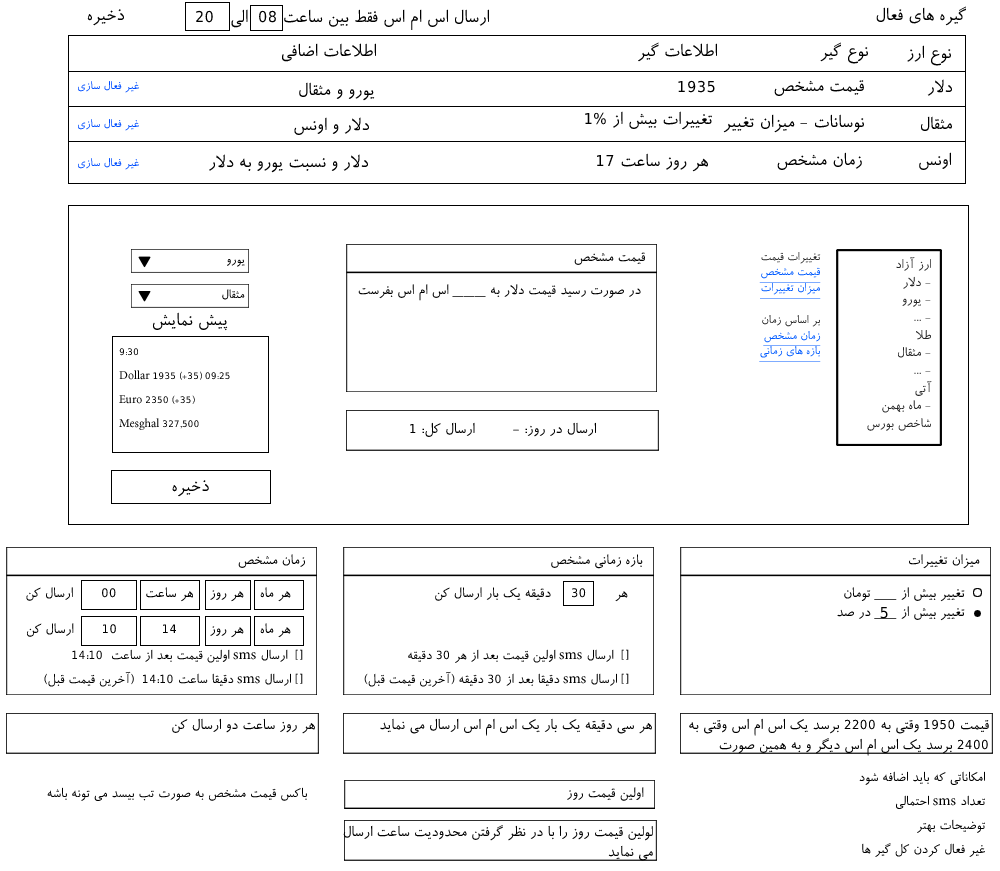
<style>
.page{position:relative;width:1000px;height:871px;background:#ffffff}
.page>*{position:absolute;margin:0}
.t1{font:20px "Roya";color:#000000}
.t2{font:13px "Roya";color:#004eff}
.t3{font:15.8px "Roya";color:#000000}
.t4{font:13.2px/15.8px "Roya";color:#005aff;text-decoration:underline}
.t5{font:13.2px/15.8px "Roya";color:#262626}
.t6{font:14.7px/17.7px "Roya";color:#262626}
.t7{font:14px "Roya";color:#000000}
.t8{font:12px/24px "Roya";color:#000000}
.t9{font:16.5px "Roya";color:#000000}
.t10{font:15.8px/18.9px "Roya";color:#000000}
.t11{font:15px/24px "Roya";color:#000000}
.t12{font:16.5px/19.9px "Roya";color:#000000}
.t13{font:15px "Roya";color:#000000}
</style>
<div class="page">
<p class="t1" style="left:876px;top:6px;width:90px;height:20px">گیره های فعال</p>
<p class="t1" style="left:87px;top:9px;width:37px;height:17px">ذخیره</p>
<p class="t1" style="left:196px;top:9px;width:293px;height:21px">ارسال اس ام اس فقط بین ساعت 08  الی   20</p>
<p class="t1" style="left:282px;top:43px;width:94px;height:19px">اطلاعات اضافی</p>
<p class="t1" style="left:638px;top:42px;width:79px;height:20px">اطلاعات گیر</p>
<p class="t1" style="left:820px;top:42px;width:48px;height:22px">نوع گیر</p>
<p class="t1" style="left:907px;top:45px;width:44px;height:21px">نوع ارز</p>
<p class="t2" style="left:78px;top:81px;width:61px;height:12px">غیر فعال سازی</p>
<p class="t1" style="left:299px;top:82px;width:76px;height:19px">یورو و مثقال</p>
<p class="t1" style="left:678px;top:80px;width:37px;height:13px">1935</p>
<p class="t1" style="left:774px;top:80px;width:90px;height:16px">قیمت مشخص</p>
<p class="t1" style="left:927px;top:79px;width:25px;height:17px">دلار</p>
<p class="t1" style="left:585px;top:111px;width:127px;height:19px">تغییرات بیش از 1%</p>
<p class="t2" style="left:78px;top:119px;width:61px;height:12px">غیر فعال سازی</p>
<p class="t1" style="left:294px;top:117px;width:75px;height:18px">دلار و اونس</p>
<p class="t1" style="left:723px;top:114px;width:141px;height:19px">نوسانات - میزان تغییر</p>
<p class="t1" style="left:921px;top:116px;width:31px;height:15px">مثقال</p>
<p class="t2" style="left:78px;top:158px;width:61px;height:12px">غیر فعال سازی</p>
<p class="t1" style="left:209px;top:154px;width:159px;height:19px">دلار و نسبت یورو به دلار</p>
<p class="t1" style="left:597px;top:153px;width:111px;height:19px">هر روز ساعت 17</p>
<p class="t1" style="left:777px;top:152px;width:85px;height:18px">زمان مشخص</p>
<p class="t1" style="left:919px;top:152px;width:32px;height:18px">اونس</p>
<p class="t3" style="left:574px;top:252px;width:71px;height:13px">قیمت مشخص</p>
<p class="t4" style="left:759px;top:252px;width:62px;height:110px"><span class="t5">تغییرات قیمت<br></span>قیمت مشخص<br>میزان تغییرات<br><br><span class="t5">بر اساس زمان<br></span>زمان مشخص<br>بازه های زمانی</p>
<p class="t6" style="left:867px;top:257px;width:65px;height:174px">ارز آزاد<br>- دلار<br>- یورو<br>- ...<br>طلا<br>- مثقال<br>- ...<br>آتی<br>- ماه بهمن<br>شاخص بورس</p>
<p class="t7" style="left:227px;top:259px;width:18px;height:8px">یورو</p>
<p class="t7" style="left:222px;top:289px;width:23px;height:11px">مثقال</p>
<p class="t3" style="left:358px;top:284px;width:283px;height:17px">در صورت رسید قیمت دلار به ______ اس ام اس بفرست</p>
<p class="t1" style="left:153px;top:312px;width:75px;height:19px">پیش نمایش</p>
<p class="t8" style="left:119px;top:348px;width:111px;height:82px">9:30<br>Dollar 1935 (+35) 09:25<br>Euro 2350 (+35)<br>Mesghal 327,500</p>
<p class="t9" style="left:410px;top:422px;width:186px;height:15px">ارسال در روز: -         ارسال کل: 1</p>
<p class="t1" style="left:172px;top:480px;width:37px;height:17px">ذخیره</p>
<p class="t3" style="left:238px;top:554px;width:67px;height:14px">زمان مشخص</p>
<p class="t3" style="left:551px;top:554px;width:92px;height:15px">بازه زمانی مشخص</p>
<p class="t3" style="left:909px;top:554px;width:71px;height:15px">میزان تغییرات</p>
<p class="t3" style="left:26px;top:587px;width:265px;height:15px">هر ماه    هر روز    هر ساعت       00       ارسال کن</p>
<p class="t3" style="left:435px;top:587px;width:193px;height:15px">هر       30     دقیقه یک بار ارسال کن</p>
<p class="t10" style="left:837px;top:587px;width:128px;height:34px">تغییر بیش از ____ تومان<br>تغییر بیش از ____ در صد</p>
<p class="t1" style="left:880px;top:607px;width:8px;height:12px">5</p>
<p class="t3" style="left:27px;top:623px;width:264px;height:15px">هر ماه    هر روز        14           10       ارسال کن</p>
<p class="t11" style="left:44px;top:649px;width:259px;height:38px">[]  ارسال sms اولین قیمت بعد از ساعت  14:10<br>[] ارسال sms دقیقا ساعت 14:10  (آخرین قیمت قبل)</p>
<p class="t11" style="left:364px;top:649px;width:265px;height:38px">[]  ارسال sms اولین قیمت بعد از هر 30 دقیقه<br>[] ارسال sms دقیقا بعد از 30 دقیقه (آخرین قیمت قبل)</p>
<p class="t9" style="left:172px;top:718px;width:143px;height:16px">هر روز ساعت دو ارسال کن</p>
<p class="t9" style="left:380px;top:718px;width:272px;height:18px">هر سی دقیقه یک بار یک اس ام اس ارسال می نماید</p>
<p class="t12" style="left:689px;top:718px;width:300px;height:38px">قیمت 1950 وقتی به 2200 برسد یک اس ام اس وقتی به<br>2400 برسد یک اس ام اس دیگر و به همین صورت</p>
<p class="t11" style="left:859px;top:771px;width:126px;height:86px">امکاناتی که باید اضافه شود<br>تعداد sms احتمالی<br>توضیحات بهتر<br>غیر فعال کردن کل گیر ها</p>
<p class="t13" style="left:47px;top:787px;width:260px;height:14px">باکس قیمت مشخص به صورت تب بیسد می تونه باشه</p>
<p class="t3" style="left:567px;top:787px;width:77px;height:14px">اولین قیمت روز</p>
<p class="t12" style="left:343px;top:825px;width:310px;height:36px">لولین قیمت روز را با در نظر گرفتن محدودیت ساعت ارسال<br>می نماید</p>
</div>
